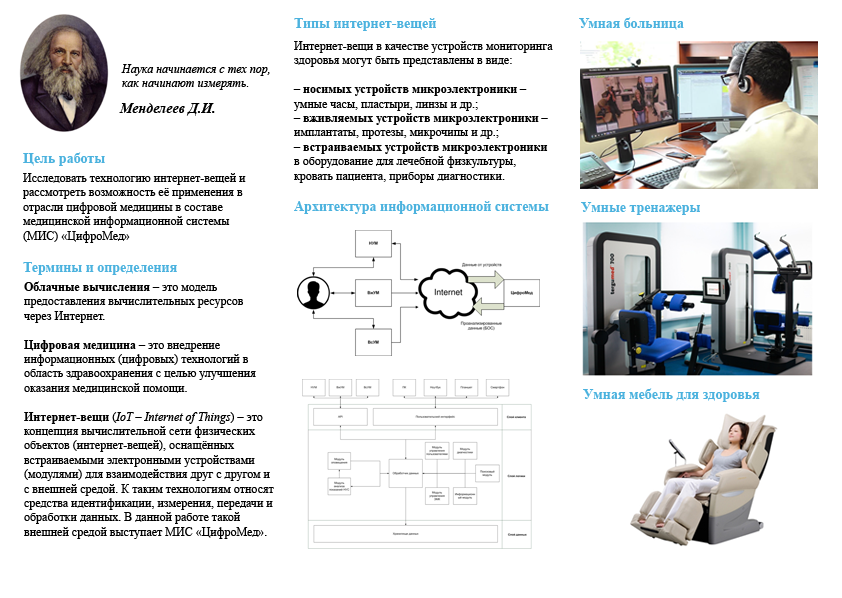
<style>
.page{position:relative;width:842px;height:598px;background:#ffffff}
.page>*{position:absolute;margin:0}
.t1{font:14px "TimesNewRomanPS-BoldMT";color:#4bb2de}
.t2{font:12px "TimesNewRomanPSMT";color:#000000}
.t3{font:12px "TimesNewRomanPS-BoldMT";color:#000000}
.t4{font:12px "TimesNewRomanPS-ItalicMT";color:#000000}
.t5{font:14px "TimesNewRomanPS-BoldItalicMT";color:#000000}
</style>
<div class="page">
<p class="t1" style="left:579px;top:17px;width:105px;height:13px">Умная больница</p>
<p class="t1" style="left:294px;top:18px;width:142px;height:13px">Типы интернет-вещей</p>
<p class="t2" style="left:293px;top:41px;width:260px;height:142px">Интернет-вещи в качестве устройств мониторинга <br>здоровья могут быть представлены в виде:<br><br>– <span class="t3">носимых устройств микроэлектроники</span> – <br>умные часы, пластыри, линзы и др.; <br>– <span class="t3">вживляемых устройств микроэлектроники</span> –<br>имплантаты, протезы, микрочипы и др.;<br>– <span class="t3">встраиваемых устройств микроэлектроники</span>  <br>в оборудование для лечебной физкультуры, <br>кровать пациента, приборы диагностики.</p>
<p class="t4" style="left:121px;top:64px;width:149px;height:26px">Наука начинается с тех пор, <br>как начинают измерять.</p>
<p class="t5" style="left:119px;top:103px;width:96px;height:13px">Менделеев Д.И.</p>
<p class="t1" style="left:23px;top:152px;width:82px;height:14px">Цель работы</p>
<p class="t2" style="left:23px;top:173px;width:223px;height:70px">Исследовать технологию интернет-вещей и <br>рассмотреть возможность её применения в <br>отрасли цифровой медицины в составе <br>медицинской информационной системы <br>(МИС) «ЦифроМед»</p>
<p class="t1" style="left:294px;top:201px;width:255px;height:13px">Архитектура информационной системы</p>
<p class="t1" style="left:581px;top:202px;width:119px;height:13px">Умные тренажеры</p>
<p class="t1" style="left:23px;top:262px;width:154px;height:13px">Термины и определения</p>
<p class="t2" style="left:24px;top:281px;width:250px;height:258px"><span class="t3">Облачные вычисления</span> – это модель <br>предоставления вычислительных ресурсов <br>через Интернет.<br><br><span class="t3">Цифровая медицина</span> – это внедрение <br>информационных (цифровых) технологий в <br>область здравоохранения с целью улучшения <br>оказания медицинской помощи.<br><br><span class="t3">Интернет-вещи</span> (<span class="t4">IoT – Internet of Things</span>) – это<br>концепция вычислительной сети физических <br>объектов (интернет-вещей), оснащённых <br>встраиваемыми электронными устройствами <br>(модулями) для взаимодействия друг с другом и <br>с внешней средой. К таким технологиям относят <br>средства идентификации, измерения, передачи и <br>обработки данных. В данной работе такой <br>внешней средой выступает МИС «ЦифроМед».</p>
<p class="t1" style="left:583px;top:388px;width:177px;height:14px">Умная мебель для здоровья</p>
</div>
